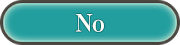
<style>
.page{position:relative;width:180px;height:45px;background:#239e9f}
.page>*{position:absolute;margin:0}
.t1{font:24px "RyuminPro-ExBold";letter-spacing:-0.04em;color:#fffffa}
</style>
<div class="page">
<p class="t1" style="left:75px;top:14px;width:29px;height:18px">No</p>
</div>
